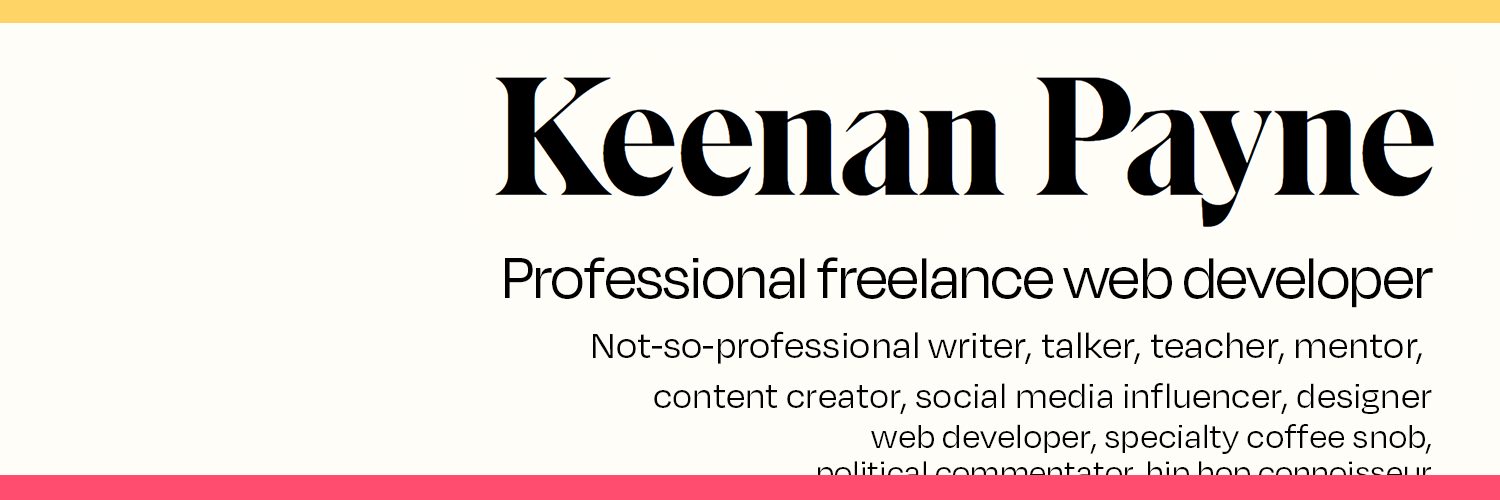
<style>
.page{position:relative;width:1500px;height:500px;background:#fffdf7}
.page>*{position:absolute;margin:0}
.t1{font:38px/50px "DegularDemo-Regular";color:#000000}
.t2{font:65px/80px "DegularDisplayDemo-Regular";color:#000000}
.t3{font:40px/60px "DegularDemo-Regular";color:#000000}
.t4{font:40px/60px "MyriadPro-Regular";color:#000000}
.t5{font:36px/40px "DegularDemo-Regular";color:#000000}
.t6{font:34px/35px "DegularDemo-Regular";color:#000000}
</style>
<div class="page">
<p class="t1" style="left:505px;top:257px;width:928px;height:232px;text-align:right"><span class="t2">Professional freelance web developer<br></span><span class="t3">Not</span><span class="t4">-</span><span class="t3">so</span><span class="t4">-</span><span class="t3">professional writer, talker, teacher, mentor, <br></span>content creator, social media influencer, designer<br><span class="t5">web developer, specialty coffee snob,<br></span><span class="t6">political commentator, hip hop connoisseur</span></p>
</div>
